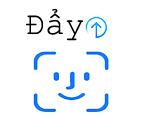
<style>
.page{position:relative;width:142px;height:116px;background:#ffffff}
.page>*{position:absolute;margin:0}
.t1{font:32px "CourierNewPSMT";color:#000000}
</style>
<div class="page">
<p class="t1" style="left:26px;top:8px;width:57px;height:33px">Đẩy</p>
</div>
